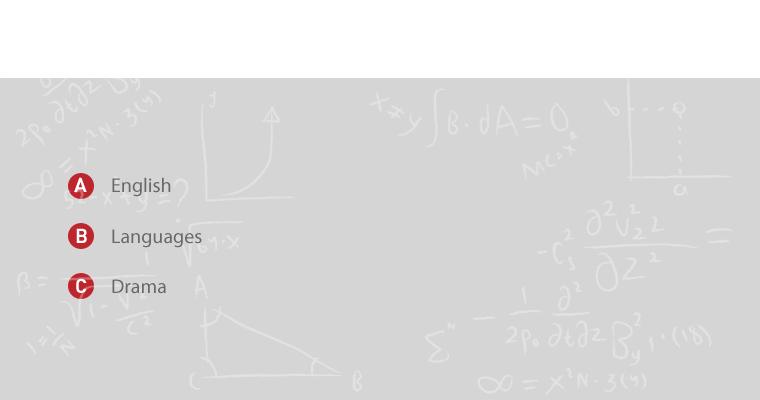
<style>
.page{position:relative;width:760px;height:400px;background:#d5d5d5}
.page>*{position:absolute;margin:0}
.t1{font:20px "MyriadPro-Regular";color:#6a6969}
</style>
<div class="page">
<p class="t1" style="left:112px;top:177px;width:59px;height:20px">English</p>
<p class="t1" style="left:112px;top:229px;width:90px;height:19px">Languages</p>
<p class="t1" style="left:112px;top:279px;width:54px;height:15px">Drama</p>
</div>
